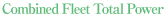
<style>
.page{position:relative;width:166px;height:16px;background:#ffffff}
.page>*{position:absolute;margin:0}
.t1{font:14px "RyuminPro-ExBold";letter-spacing:-0.08em;color:#5fbb78}
</style>
<div class="page">
<p class="t1" style="left:2px;top:3px;width:162px;height:11px">Combined Fleet Total Power</p>
</div>
